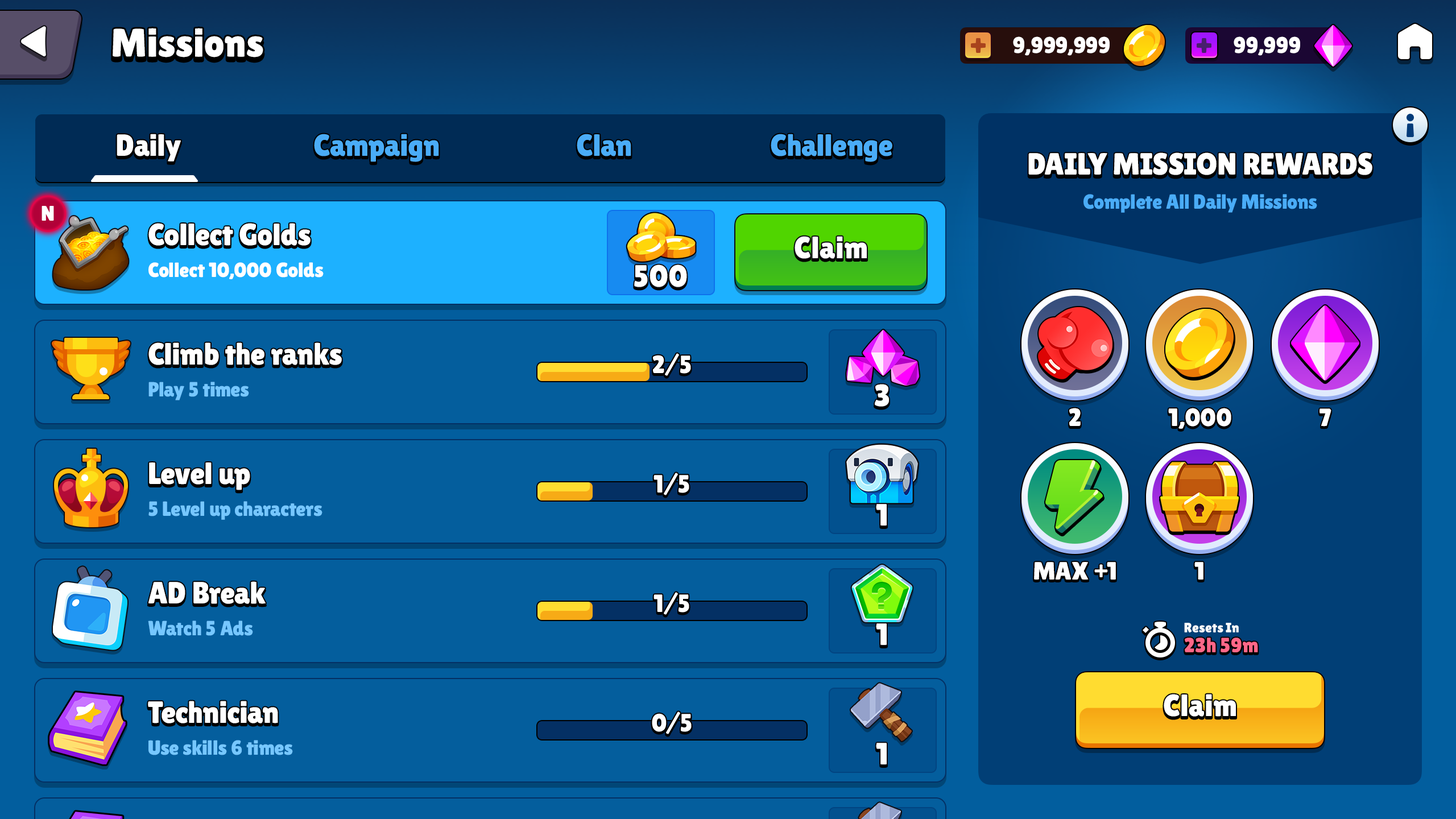
<style>
.page{position:relative;width:1456px;height:819px;background:#045e9d}
.page>*{position:absolute;margin:0}
.t1{font:39.8px "LilitaOne";color:#ffffff}
.t2{font:22.7px "LilitaOne";letter-spacing:-0.01em;color:#ffffff;text-transform:uppercase}
.t3{font:30.7px "LilitaOne";color:#ffffff}
.t4{font:30.7px "LilitaOne";color:#4aacf7}
.t5{font:30.7px "LilitaOne";color:#ffffff;text-transform:uppercase}
.t6{font:20.5px "LilitaOne";color:#4aacf7}
.t7{font:21.2px "LilitaOne";color:#ffffff;text-transform:uppercase}
.t8{font:30.7px "LilitaOne";letter-spacing:0.02em;color:#ffffff}
.t9{font:20.5px "LilitaOne";color:#ffffff}
.t10{font:30.7px "LilitaOne";letter-spacing:0.02em;color:#ffffff;text-transform:uppercase}
.t11{font:25px "LilitaOne";letter-spacing:0.02em;color:#ffffff}
.t12{font:20.5px "LilitaOne";color:#76c7ff}
.t13{font:25px "LilitaOne";color:#ffffff;text-transform:uppercase}
.t14{font:13.6px "LilitaOne";letter-spacing:-0.01em;color:#ffffff}
.t15{font:20.5px "LilitaOne";letter-spacing:-0.01em;color:#ff6788}
</style>
<div class="page">
<p class="t1" style="left:113px;top:28px;width:150px;height:29px">Missions</p>
<p class="t2" style="left:1013px;top:36px;width:97px;height:20px">9,999,999</p>
<p class="t2" style="left:1234px;top:36px;width:66px;height:20px">99,999</p>
<p class="t3" style="left:117px;top:134px;width:64px;height:28px">Daily</p>
<p class="t4" style="left:314px;top:134px;width:125px;height:28px">Campaign</p>
<p class="t4" style="left:577px;top:134px;width:54px;height:22px">Clan</p>
<p class="t4" style="left:771px;top:134px;width:121px;height:28px">Challenge</p>
<p class="t5" style="left:1028px;top:152px;width:344px;height:23px">Daily Mission Rewards</p>
<p class="t6" style="left:1083px;top:194px;width:234px;height:19px">Complete All Daily Missions</p>
<p class="t7" style="left:42px;top:206px;width:12px;height:15px">N</p>
<p class="t3" style="left:148px;top:223px;width:163px;height:23px">Collect Golds</p>
<p class="t8" style="left:795px;top:236px;width:72px;height:23px">Claim</p>
<p class="t9" style="left:148px;top:262px;width:176px;height:17px">Collect 10,000 Golds</p>
<p class="t10" style="left:634px;top:264px;width:53px;height:23px">500</p>
<p class="t3" style="left:148px;top:342px;width:194px;height:23px">Climb the ranks</p>
<p class="t11" style="left:652px;top:353px;width:39px;height:23px">2/5</p>
<p class="t12" style="left:148px;top:382px;width:101px;height:18px">Play 5 times</p>
<p class="t10" style="left:875px;top:384px;width:14px;height:23px">3</p>
<p class="t13" style="left:1069px;top:408px;width:12px;height:18px">2</p>
<p class="t13" style="left:1168px;top:408px;width:63px;height:21px">1,000</p>
<p class="t13" style="left:1319px;top:408px;width:12px;height:19px">7</p>
<p class="t3" style="left:149px;top:462px;width:101px;height:28px">Level up</p>
<p class="t11" style="left:653px;top:473px;width:36px;height:22px">1/5</p>
<p class="t12" style="left:148px;top:501px;width:174px;height:19px">5 Level up characters</p>
<p class="t10" style="left:876px;top:504px;width:11px;height:22px">1</p>
<p class="t13" style="left:1034px;top:562px;width:82px;height:18px">max +1</p>
<p class="t13" style="left:1194px;top:562px;width:9px;height:18px">1</p>
<p class="t3" style="left:148px;top:581px;width:118px;height:23px">AD Break</p>
<p class="t11" style="left:653px;top:592px;width:36px;height:23px">1/5</p>
<p class="t12" style="left:148px;top:620px;width:105px;height:16px">Watch 5 Ads</p>
<p class="t10" style="left:876px;top:623px;width:11px;height:22px">1</p>
<p class="t14" style="left:1184px;top:623px;width:55px;height:9px">Resets In</p>
<p class="t15" style="left:1185px;top:638px;width:73px;height:14px">23h 59m</p>
<p class="t3" style="left:148px;top:701px;width:130px;height:22px">Technician</p>
<p class="t8" style="left:1164px;top:694px;width:72px;height:23px">Claim</p>
<p class="t11" style="left:652px;top:711px;width:40px;height:23px">0/5</p>
<p class="t12" style="left:148px;top:740px;width:145px;height:15px">Use skills 6 times</p>
<p class="t10" style="left:876px;top:743px;width:11px;height:21px">1</p>
</div>
